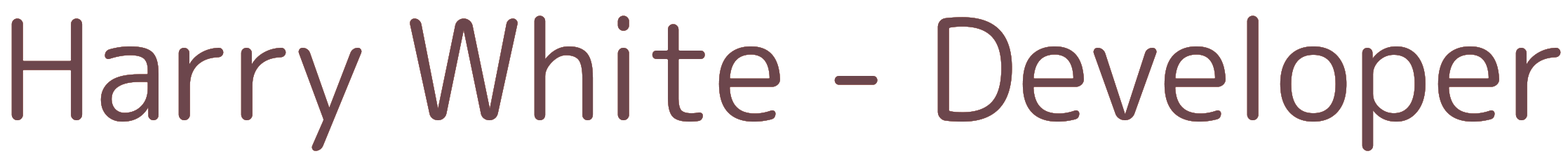
<style>
.page{position:relative;width:1568px;height:168px;background:#ffffff}
.page>*{position:absolute;margin:0}
.t1{font:138.9px "RoundedMplus1c-Regular";color:#6c464c}
</style>
<div class="page">
<p class="t1" style="left:11px;top:15px;width:1550px;height:136px">Harry White - Developer</p>
<p class="t1" style="left:11px;top:15px;width:1550px;height:136px">Harry White - Developer</p>
<p class="t1" style="left:11px;top:15px;width:1550px;height:136px">Harry White - Developer</p>
<p class="t1" style="left:11px;top:15px;width:1550px;height:136px">Harry White - Developer</p>
</div>
